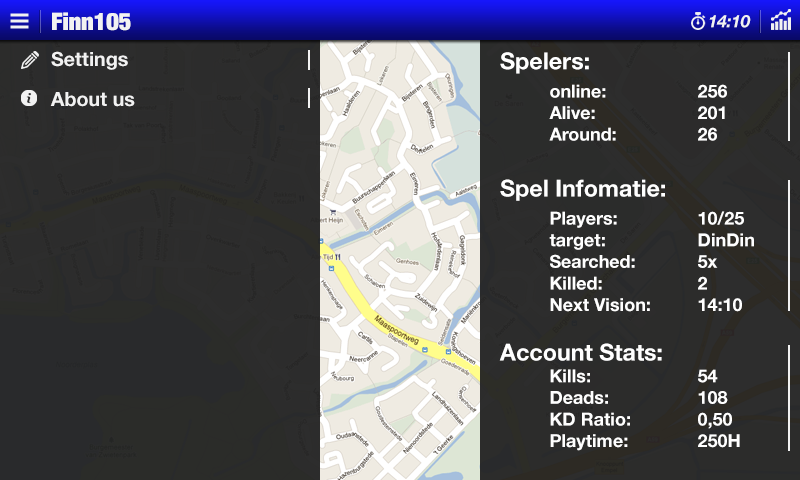
<style>
.page{position:relative;width:800px;height:480px}
.page>*{position:absolute;margin:0}
.t1{font:24px "HelveticaNeueLTStd-XBlkCn";color:#f2f2f2}
.t2{font:17.1px "HelveticaNeueLTStd-BdIt";color:#f2f2f2}
.t3{font:19.7px/40px "HelveticaNeueLTStd-Bd";color:#f2f2f2}
.t4{font:18px "HelveticaNeueLTStd-Bd";color:#ffffff}
.t5{font:23.3px "HelveticaNeueLTStd-Bd";color:#ffffff}
.t6{font:23.3px "HelveticaNeueLTStd-Bd";color:#ffffff;text-transform:uppercase}
</style>
<div class="page">
<p class="t1" style="left:52px;top:12px;width:79px;height:19px">Finn105</p>
<p class="t2" style="left:709px;top:15px;width:42px;height:13px">14:10</p>
<p class="t3" style="left:50px;top:51px;width:85px;height:56px">Settings<br>About us</p>
<p class="t4" style="left:499px;top:52px;width:255px;height:399px"><span class="t5">Spelers</span><span class="t6">:<br>   </span>online:      256<br>   Alive:      201<br>   Around:    26<br><br><span class="t5">Spel Infomatie:<br>   </span>Players:     10/25<br>   target:      DinDin<br>   Searched:     5x<br>   Killed:     2<br> Next Vision: 14:10<br><br><span class="t5">Account Stats:</span><br>   Kills:       54<br> Deads:  108<br> KD Ratio:  0,50<br> Playtime:  250H</p>
</div>
